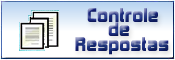
<style>
.page{position:relative;width:175px;height:60px}
.page>*{position:absolute;margin:0}
.t1{font:18px "Kimberley";letter-spacing:0.021em}
</style>
<div class="page">
<p class="t1" style="left:87px;top:8px;width:71px;height:14px">Controle</p>
<p class="t1" style="left:108px;top:22px;width:22px;height:14px">de</p>
<p class="t1" style="left:75px;top:37px;width:94px;height:18px">Respostas</p>
</div>
